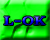
<style>
.page{position:relative;width:50px;height:40px}
.page>*{position:absolute;margin:0}
.t1{font:11.2px "MyungjoXB-HM";scale:1.53 1}
</style>
<div class="page">
<p class="t1" style="left:4px;top:16px;width:42px;height:9px">L-OK</p>
</div>
